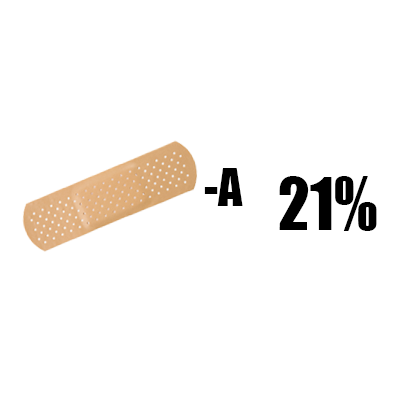
<style>
.page{position:relative;width:400px;height:400px;background:#ffffff}
.page>*{position:absolute;margin:0}
.t1{font:48px "Impact";color:#000000}
.t2{font:66.9px "Impact";color:#000000;scale:0.95 1}
</style>
<div class="page">
<p class="t1" style="left:204px;top:168px;width:39px;height:38px">-A</p>
<p class="t2" style="left:279px;top:176px;width:98px;height:55px">21%</p>
</div>
